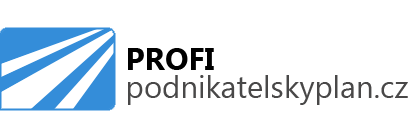
<style>
.page{position:relative;width:410px;height:136px;background:#ffffff}
.page>*{position:absolute;margin:0}
.t1{font:31px/14px "MyanmarText";color:#494848}
.t2{font:31px/14px "MyanmarText-Bold";color:#000000}
</style>
<div class="page">
<p class="t1" style="left:128px;top:48px;width:280px;height:57px;text-align:justify"><span class="t2">PROFI<br><br></span>podnikatelskyplan.cz</p>
</div>
